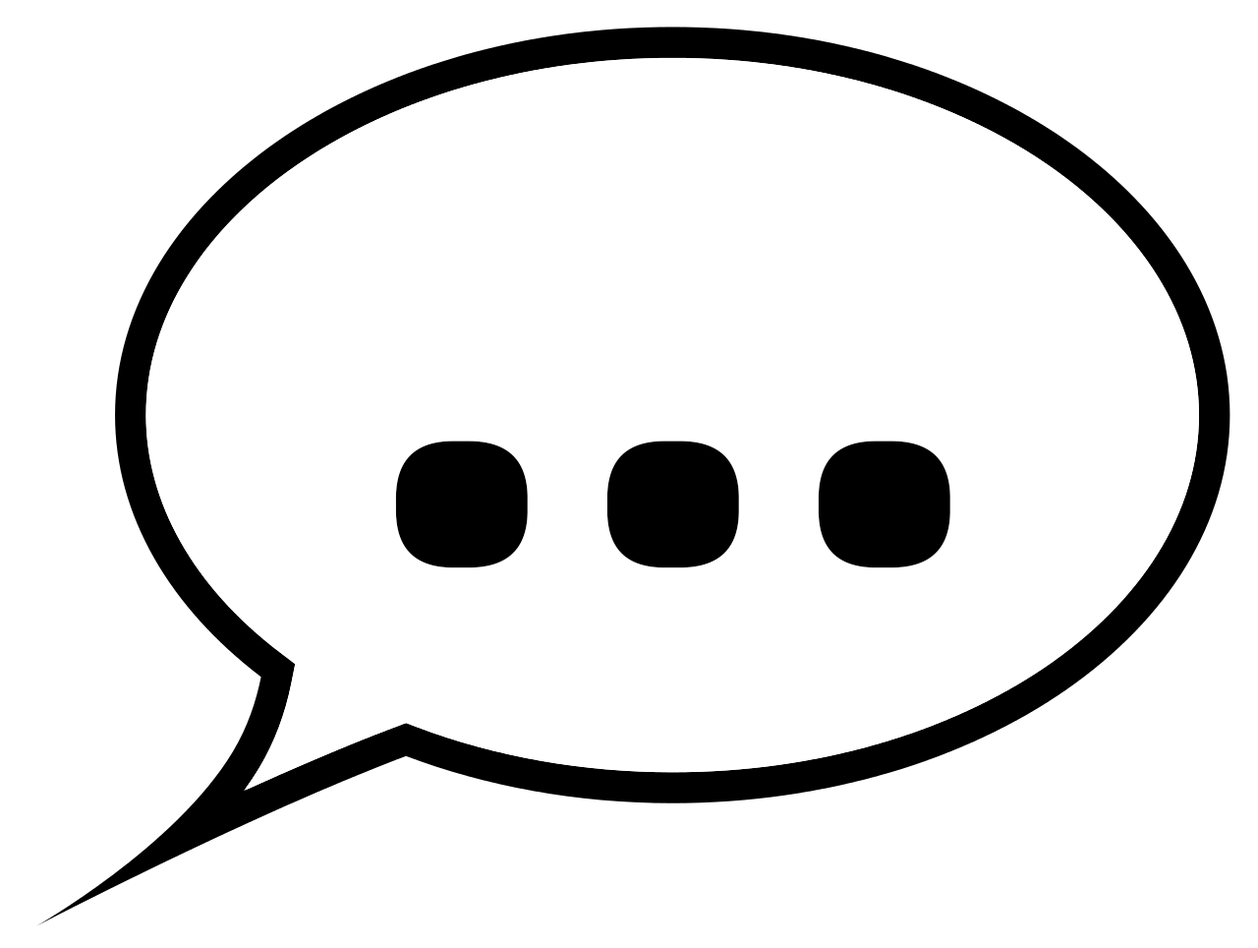
<style>
.page{position:relative;width:1258px;height:948px;background:#ffffff}
.page>*{position:absolute;margin:0}
.t1{font:866.1px "Omnes-Semibold";letter-spacing:0.005em;color:#000000}
</style>
<div class="page">
<p class="t1" style="left:395px;top:440px;width:556px;height:128px">...</p>
</div>
